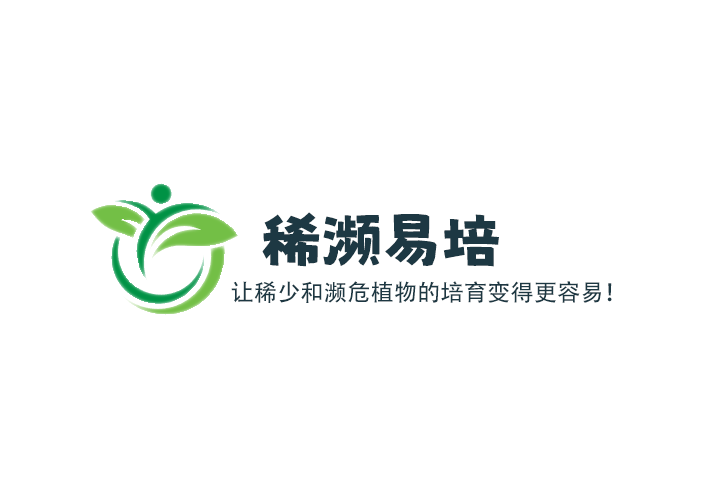
<style>
.page{position:relative;width:711px;height:478px;background:#ffffff}
.page>*{position:absolute;margin:0}
.t1{font:60px "MaokenAssortedSans";color:#1d3843}
.t2{font:23.3px "AdobeHeitiStd-Regular";color:#1d3843}
</style>
<div class="page">
<p class="t1" style="left:262px;top:212px;width:237px;height:55px">稀濒易培</p>
<p class="t2" style="left:231px;top:281px;width:381px;height:22px">让稀少和濒危植物的培育变得更容易！</p>
</div>
